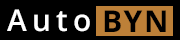
<style>
.page{position:relative;width:180px;height:40px;background:#000000}
.page>*{position:absolute;margin:0}
.t1{font:30px "OpenSans-SemiBold";letter-spacing:0.18em;color:#ffffff}
.t2{font:30px "OpenSans-Bold";letter-spacing:0.05em;color:#000000}
</style>
<div class="page">
<p class="t1" style="left:7px;top:9px;width:83px;height:23px">Auto</p>
<p class="t2" style="left:104px;top:10px;width:62px;height:22px">BYN</p>
</div>
